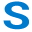
<style>
.page{position:relative;width:32px;height:32px;background:#ffffff}
.page>*{position:absolute;margin:0}
.t1{font:38px "Roboto-Bold";letter-spacing:-0.06em;color:#007acc;scale:1.23 1}
</style>
<div class="page">
<p class="t1" style="left:3px;top:1px;width:26px;height:29px">S</p>
</div>
